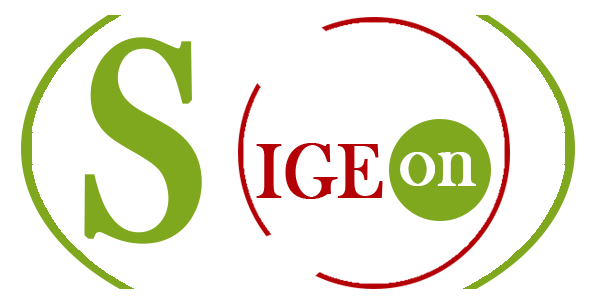
<style>
.page{position:relative;width:600px;height:300px;background:#ffffff}
.page>*{position:absolute;margin:0}
.t1{font:284.8px "BaskOldFace";letter-spacing:-0.02em;color:#80a81f;font-weight:bold;scale:0.9 1}
.t2{font:80.2px "BaskOldFace";letter-spacing:-0.02em;color:#b40105;font-weight:bold;scale:0.9 1}
.t3{font:80.2px "BaskOldFace";letter-spacing:0.2em;color:#b40105;font-weight:bold;scale:0.9 1}
.t4{font:80.2px "BaskOldFace";letter-spacing:-0.01em;color:#ffffff;font-weight:bold;scale:0.9 1}
</style>
<div class="page">
<p class="t1" style="left:84px;top:37px;width:118px;height:207px">S</p>
<p class="t2" style="left:256px;top:143px;width:220px;height:56px">IG<span class="t3">E</span><span class="t4">on</span></p>
</div>
